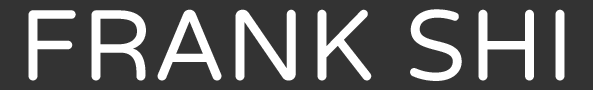
<style>
.page{position:relative;width:593px;height:90px;background:#333333}
.page>*{position:absolute;margin:0}
.t1{font:100px "VarelaRound";letter-spacing:0.025em;color:#ffffff}
</style>
<div class="page">
<p class="t1" style="left:28px;top:9px;width:537px;height:72px">FRANK SHI</p>
</div>
